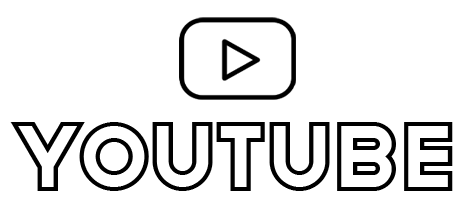
<style>
.page{position:relative;width:470px;height:209px;background:#ffffff}
.page>*{position:absolute;margin:0}
.t1{font:100px "Avalon-Regular";color:#000000}
</style>
<div class="page">
<p class="t1" style="left:10px;top:122px;width:443px;height:69px">YouTube</p>
</div>
